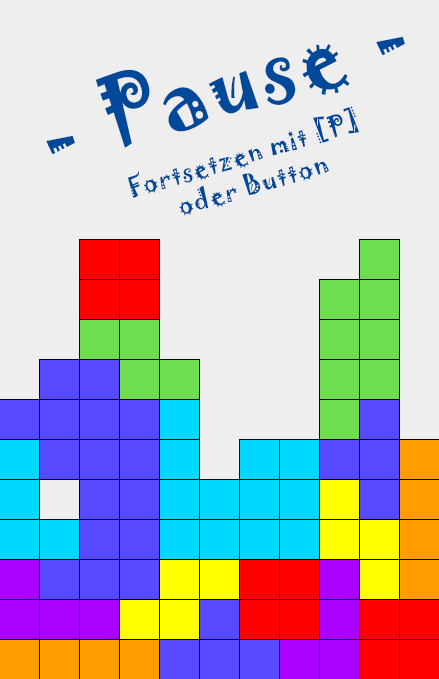
<style>
.page{position:relative;width:439px;height:679px;background:#eeeeee}
.page>*{position:absolute;margin:0}
.t1{font:25.9px "Jokerman-Regular";letter-spacing:0.05em;color:#004899;scale:0.93 1}
.t2{font:86.3px "Jokerman-Regular";letter-spacing:0.05em;color:#004899;scale:0.93 1}
</style>
<div class="page">
<p class="t1" style="left:46px;top:36px;width:359px;height:180px;text-align:center;rotate:-17deg"><span class="t2">- Pause -<br><br></span>Fortsetzen mit [P]<br>oder Button</p>
</div>
